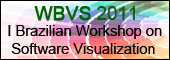
<style>
.page{position:relative;width:170px;height:60px}
.page>*{position:absolute;margin:0}
.t1{font:18.7px "ArialMT";color:#016401;font-weight:bold}
.t2{font:18.7px "ArialMT";color:#016401}
.t3{font:14.7px "ArialMT";color:#000000}
.t4{font:14.7px "MyriadPro-Regular";color:#000000}
</style>
<div class="page">
<p class="t1" style="left:34px;top:6px;width:101px;height:15px">WBVS<span class="t2"> 2011</span></p>
<p class="t3" style="left:8px;top:25px;width:154px;height:29px">I Brazilian Workshop on<br> Software Visualizatio<span class="t4">n</span></p>
</div>
